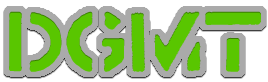
<style>
.page{position:relative;width:268px;height:82px;background:#aaaaaa}
.page>*{position:absolute;margin:0}
.t1{font:75px "Crass";color:#59c600}
</style>
<div class="page">
<p class="t1" style="left:9px;top:11px;width:252px;height:61px">DGMT</p>
</div>
